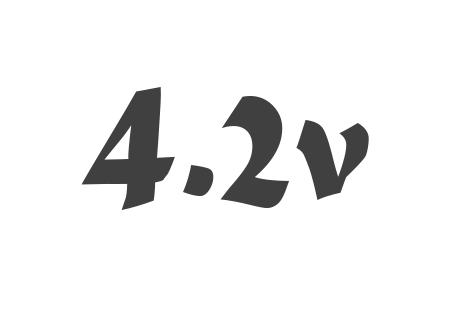
<style>
.page{position:relative;width:450px;height:310px;background:#ffffff}
.page>*{position:absolute;margin:0}
.t1{font:180px "MaturaMTScriptCapitals";color:#404040;scale:0.9 1}
</style>
<div class="page">
<p class="t1" style="left:81px;top:87px;width:288px;height:123px">4.2v</p>
</div>
